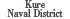
<style>
.page{position:relative;width:70px;height:19px;background:#ffffff}
.page>*{position:absolute;margin:0}
.t1{font:10px/9px "RyuminPro-ExBold";letter-spacing:-0.04em;color:#4c4843;scale:0.9 1}
</style>
<div class="page">
<p class="t1" style="left:7px;top:0px;width:56px;height:18px;text-align:center">Kure<br>Naval District</p>
</div>
